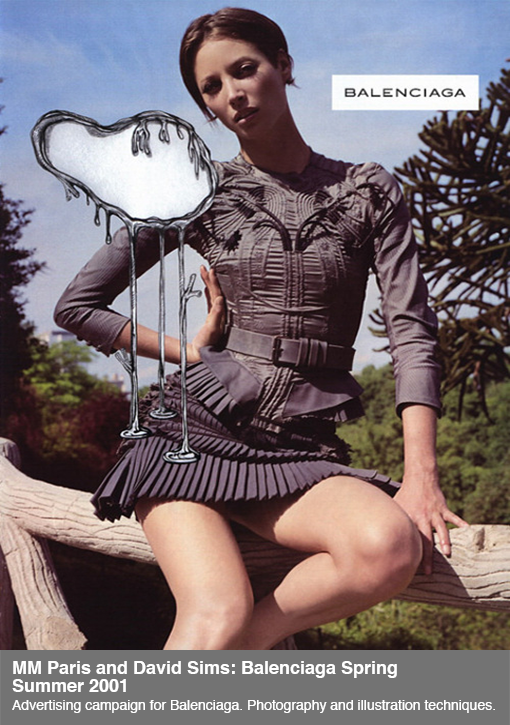
<style>
.page{position:relative;width:510px;height:725px}
.page>*{position:absolute;margin:0}
.t1{font:14px/18px "Helvetica";color:#ffffff}
.t2{font:18px/18px "Helvetica-Bold";color:#ffffff}
</style>
<div class="page">
<p class="t1" style="left:12px;top:661px;width:483px;height:52px"><span class="t2">MM Paris and David Sims: Balenciaga Spring <br>Summer 2001<br></span>Advertising campaign for Balenciaga. Photography and illustration techniques.</p>
</div>
